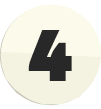
<style>
.page{position:relative;width:101px;height:109px;background:#fcfbeb}
.page>*{position:absolute;margin:0}
.t1{font:72px "MovaviGrotesqueBlack";color:#282828}
</style>
<div class="page">
<p class="t1" style="left:28px;top:30px;width:44px;height:51px">4</p>
</div>
